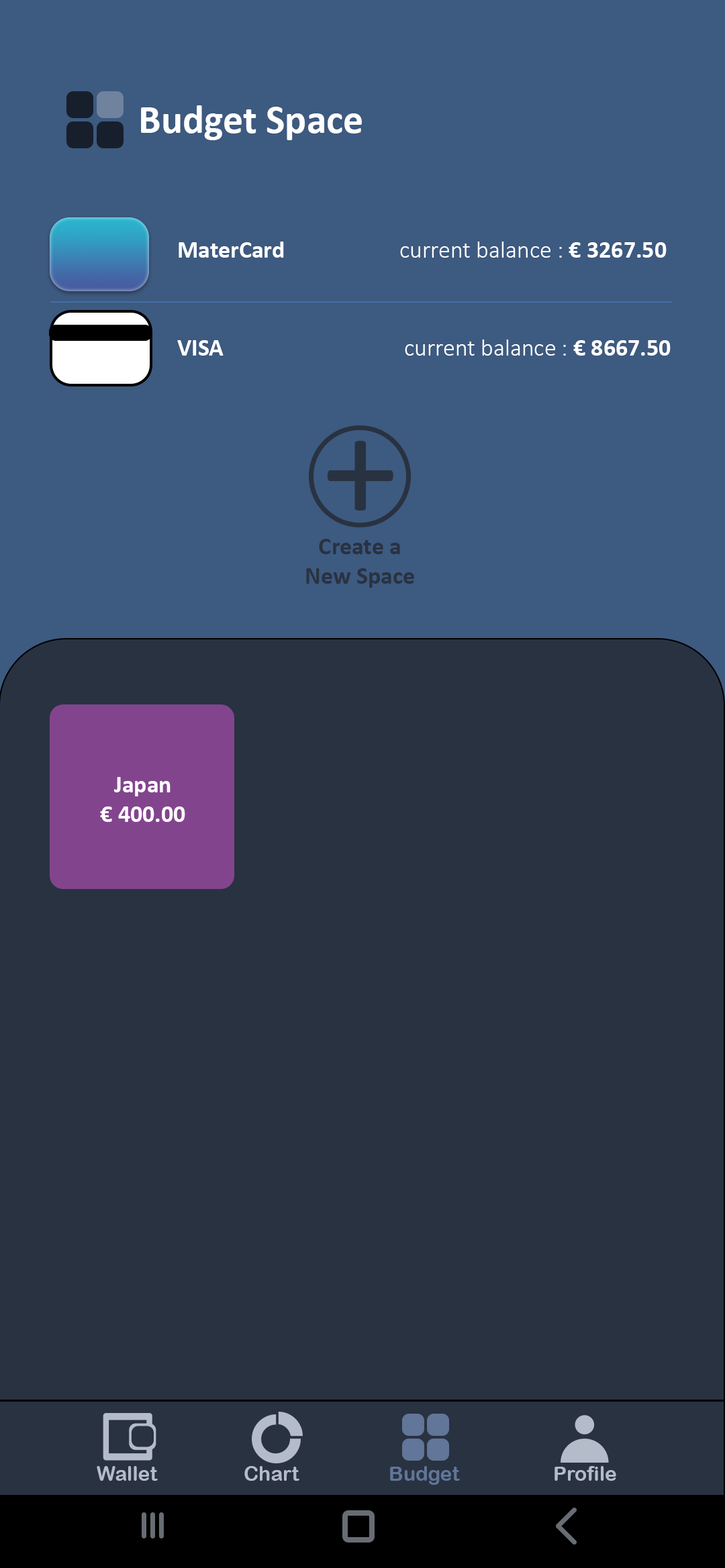
<style>
.page{position:relative;width:725px;height:1568px;background:#293241}
.page>*{position:absolute;margin:0}
.t1{font:40.3px "Calibri-Bold";color:#ffffff}
.t2{font:24.2px "Calibri-Light";color:#ffffff}
.t3{font:24.2px "Calibri-Bold";color:#ffffff}
.t4{font:152.8px "Calibri";color:#293241}
.t5{font:24.2px "Calibri-Bold";color:#293241}
.t6{font:20.1px "ArialRoundedMTBold";color:#b4bcc9}
.t7{font:20.1px "ArialRoundedMTBold";color:#617698}
</style>
<div class="page">
<p class="t1" style="left:141px;top:105px;width:221px;height:35px">Budget Space</p>
<p class="t2" style="left:178px;top:242px;width:488px;height:16px"><span class="t3">MaterCard                     </span>current balance : <span class="t3">€ 3267.50</span></p>
<p class="t2" style="left:177px;top:339px;width:493px;height:17px"><span class="t3">VISA                                 </span>current balance : <span class="t3">€ 8667.50</span></p>
<p class="t4" style="left:327px;top:441px;width:66px;height:70px">+</p>
<p class="t5" style="left:306px;top:539px;width:108px;height:49px;text-align:center">Create a <br>New Space</p>
<p class="t3" style="left:100px;top:777px;width:85px;height:45px;text-align:center">Japan<br>€ 400.00</p>
<p class="t6" style="left:97px;top:1466px;width:61px;height:15px">Wallet</p>
<p class="t6" style="left:244px;top:1466px;width:55px;height:15px">Chart</p>
<p class="t7" style="left:390px;top:1466px;width:70px;height:19px">Budget</p>
<p class="t6" style="left:554px;top:1466px;width:62px;height:15px">Profile</p>
</div>
